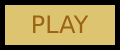
<style>
.page{position:relative;width:120px;height:50px;background:#ddc471}
.page>*{position:absolute;margin:0}
.t1{font:24px "DejaVuSans";color:#9c6414}
</style>
<div class="page">
<p class="t1" style="left:33px;top:15px;width:56px;height:18px">PLAY</p>
</div>
